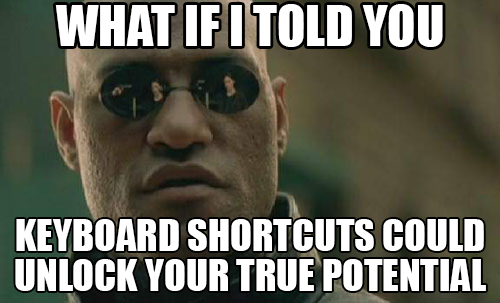
<style>
.page{position:relative;width:500px;height:303px}
.page>*{position:absolute;margin:0}
.t1{font:52px "Impact";color:#ffffff}
.t2{font:40px/40px "Impact";color:#ffffff}
</style>
<div class="page">
<p class="t1" style="left:55px;top:4px;width:388px;height:43px">WHAT IF I TOLD YOU</p>
<p class="t2" style="left:15px;top:219px;width:471px;height:72px;text-align:center">KEYBOARD SHORTCUTS COULD UNLOCK YOUR TRUE POTENTIAL</p>
</div>
